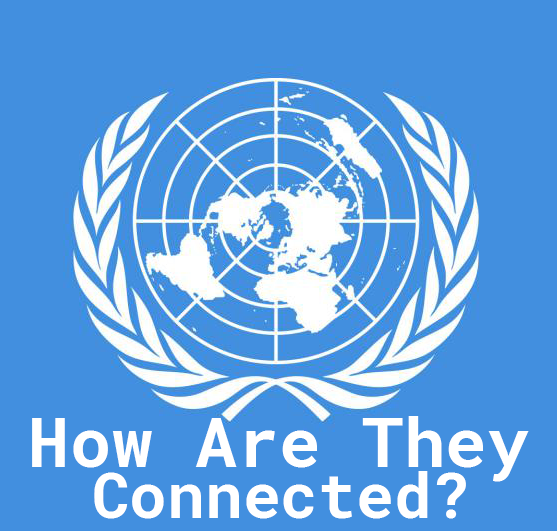
<style>
.page{position:relative;width:557px;height:531px;background:#428fdf}
.page>*{position:absolute;margin:0}
.t1{font:69.4px "RobotoMono-Bold";color:#ffffff}
.t2{font:63px "RobotoMono-Bold";color:#ffffff}
</style>
<div class="page">
<p class="t1" style="left:32px;top:416px;width:497px;height:66px">How Are They</p>
<p class="t2" style="left:94px;top:471px;width:372px;height:48px">Connected?</p>
</div>
